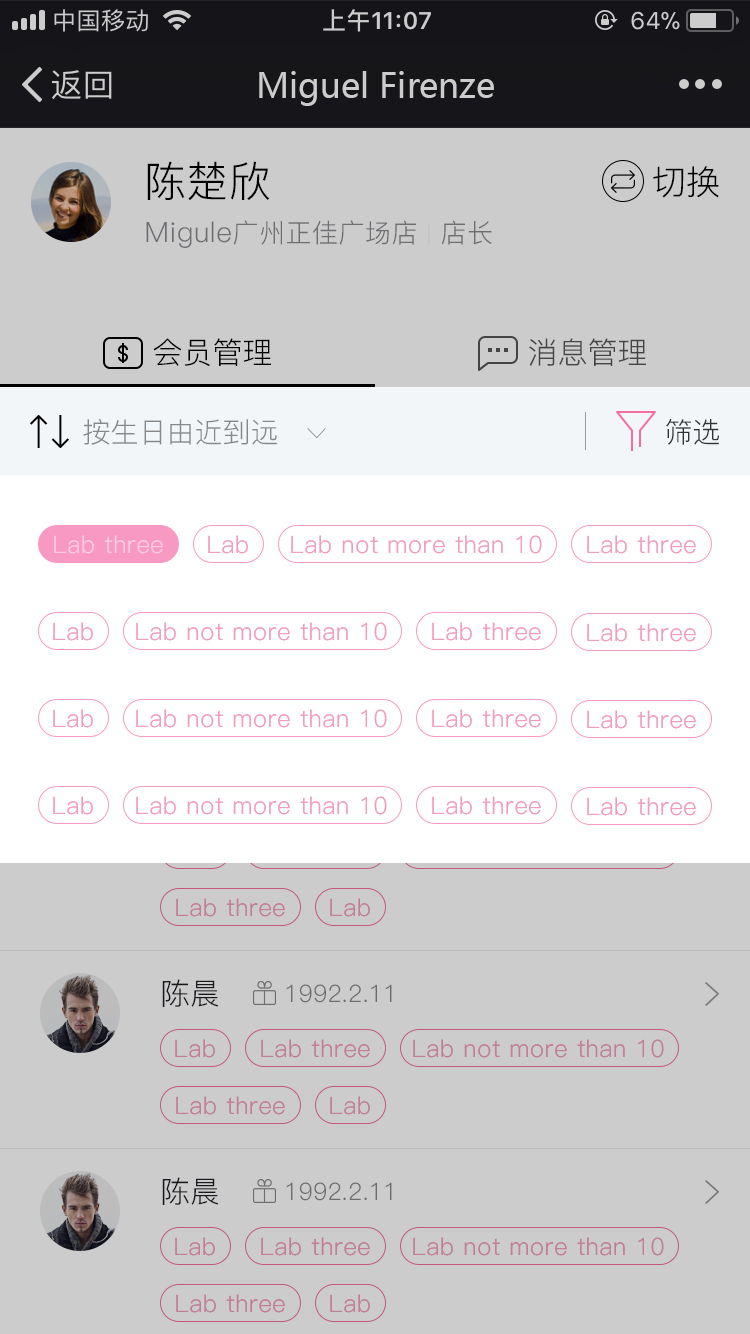
<style>
.page{position:relative;width:750px;height:1334px;background:#cccccc}
.page>*{position:absolute;margin:0}
.t1{font:34px "MicrosoftYaHei";color:#cccccc}
.t2{font:42px "PingFang-SC-Regular";letter-spacing:0.02em;color:#000000}
.t3{font:34px "PingFang-SC-Regular";letter-spacing:0.02em;color:#000000}
.t4{font:26px "PingFang-SC-Regular";letter-spacing:0.02em;color:#6e6e72}
.t5{font:28px "PingFang-SC-Regular";letter-spacing:0.02em;color:#6e6e72}
.t6{font:20px "PingFang-SC-Regular";letter-spacing:0.02em;color:#6e6e72}
.t7{font:30px "PingFang-SC-Regular";color:#000000}
.t8{font:30px "PingFang-SC-Regular";color:#555555}
.t9{font:28px "PingFang-SC-Regular";color:#888888}
.t10{font:28px "PingFang-SC-Regular";color:#333333}
.t11{font:24px "PingFang-SC-Regular";letter-spacing:0.03em;color:#fbcce0}
.t12{font:24px "PingFang-SC-Regular";letter-spacing:0.03em;color:#f19ebc}
.t13{font:24px "PingFang-SC-Regular";letter-spacing:0.03em;color:#c17e96}
.t14{font:30px "PingFang-SC-Regular";color:#1d1d26}
.t15{font:24px "PingFang-SC-Regular";color:#6d6d6d}
</style>
<div class="page">
<p class="t1" style="left:259px;top:71px;width:235px;height:35px">Miguel Firenze</p>
<p class="t2" style="left:147px;top:161px;width:123px;height:40px">陈楚欣</p>
<p class="t3" style="left:653px;top:166px;width:66px;height:32px">切换</p>
<p class="t4" style="left:146px;top:220px;width:346px;height:28px"><span class="t5">Migule</span>广州正佳广场店 <span class="t6">|</span> 店长</p>
<p class="t7" style="left:153px;top:338px;width:118px;height:28px">会员管理</p>
<p class="t8" style="left:529px;top:338px;width:117px;height:28px">消息管理</p>
<p class="t9" style="left:83px;top:419px;width:194px;height:26px">按生日由近到远</p>
<p class="t9" style="left:83px;top:419px;width:194px;height:26px">按生日由近到远</p>
<p class="t10" style="left:666px;top:419px;width:53px;height:26px">筛选</p>
<p class="t10" style="left:666px;top:419px;width:53px;height:26px">筛选</p>
<p class="t11" style="left:54px;top:535px;width:109px;height:19px">Lab three</p>
<p class="t12" style="left:208px;top:535px;width:40px;height:19px">Lab</p>
<p class="t12" style="left:291px;top:535px;width:251px;height:19px">Lab not more than 10</p>
<p class="t12" style="left:587px;top:535px;width:109px;height:19px">Lab three</p>
<p class="t12" style="left:53px;top:622px;width:40px;height:19px">Lab</p>
<p class="t12" style="left:136px;top:622px;width:251px;height:19px">Lab not more than 10</p>
<p class="t12" style="left:432px;top:622px;width:109px;height:19px">Lab three</p>
<p class="t12" style="left:587px;top:623px;width:109px;height:19px">Lab three</p>
<p class="t12" style="left:53px;top:709px;width:40px;height:19px">Lab</p>
<p class="t12" style="left:136px;top:709px;width:251px;height:19px">Lab not more than 10</p>
<p class="t12" style="left:432px;top:709px;width:109px;height:19px">Lab three</p>
<p class="t12" style="left:587px;top:710px;width:109px;height:19px">Lab three</p>
<p class="t12" style="left:53px;top:796px;width:40px;height:19px">Lab</p>
<p class="t12" style="left:136px;top:796px;width:251px;height:19px">Lab not more than 10</p>
<p class="t12" style="left:432px;top:796px;width:109px;height:19px">Lab three</p>
<p class="t12" style="left:587px;top:797px;width:109px;height:19px">Lab three</p>
<p class="t13" style="left:176px;top:898px;width:109px;height:19px">Lab three</p>
<p class="t13" style="left:330px;top:898px;width:40px;height:19px">Lab</p>
<p class="t14" style="left:162px;top:979px;width:57px;height:28px">陈晨</p>
<p class="t15" style="left:286px;top:984px;width:106px;height:19px">1992.2.11</p>
<p class="t13" style="left:175px;top:1039px;width:40px;height:19px">Lab</p>
<p class="t13" style="left:261px;top:1039px;width:109px;height:19px">Lab three</p>
<p class="t13" style="left:413px;top:1039px;width:251px;height:19px">Lab not more than 10</p>
<p class="t13" style="left:176px;top:1096px;width:109px;height:19px">Lab three</p>
<p class="t13" style="left:330px;top:1096px;width:40px;height:19px">Lab</p>
<p class="t14" style="left:162px;top:1177px;width:57px;height:28px">陈晨</p>
<p class="t15" style="left:286px;top:1182px;width:106px;height:19px">1992.2.11</p>
<p class="t13" style="left:175px;top:1237px;width:40px;height:19px">Lab</p>
<p class="t13" style="left:261px;top:1237px;width:109px;height:19px">Lab three</p>
<p class="t13" style="left:413px;top:1237px;width:251px;height:19px">Lab not more than 10</p>
<p class="t13" style="left:176px;top:1294px;width:109px;height:19px">Lab three</p>
<p class="t13" style="left:330px;top:1294px;width:40px;height:19px">Lab</p>
</div>
